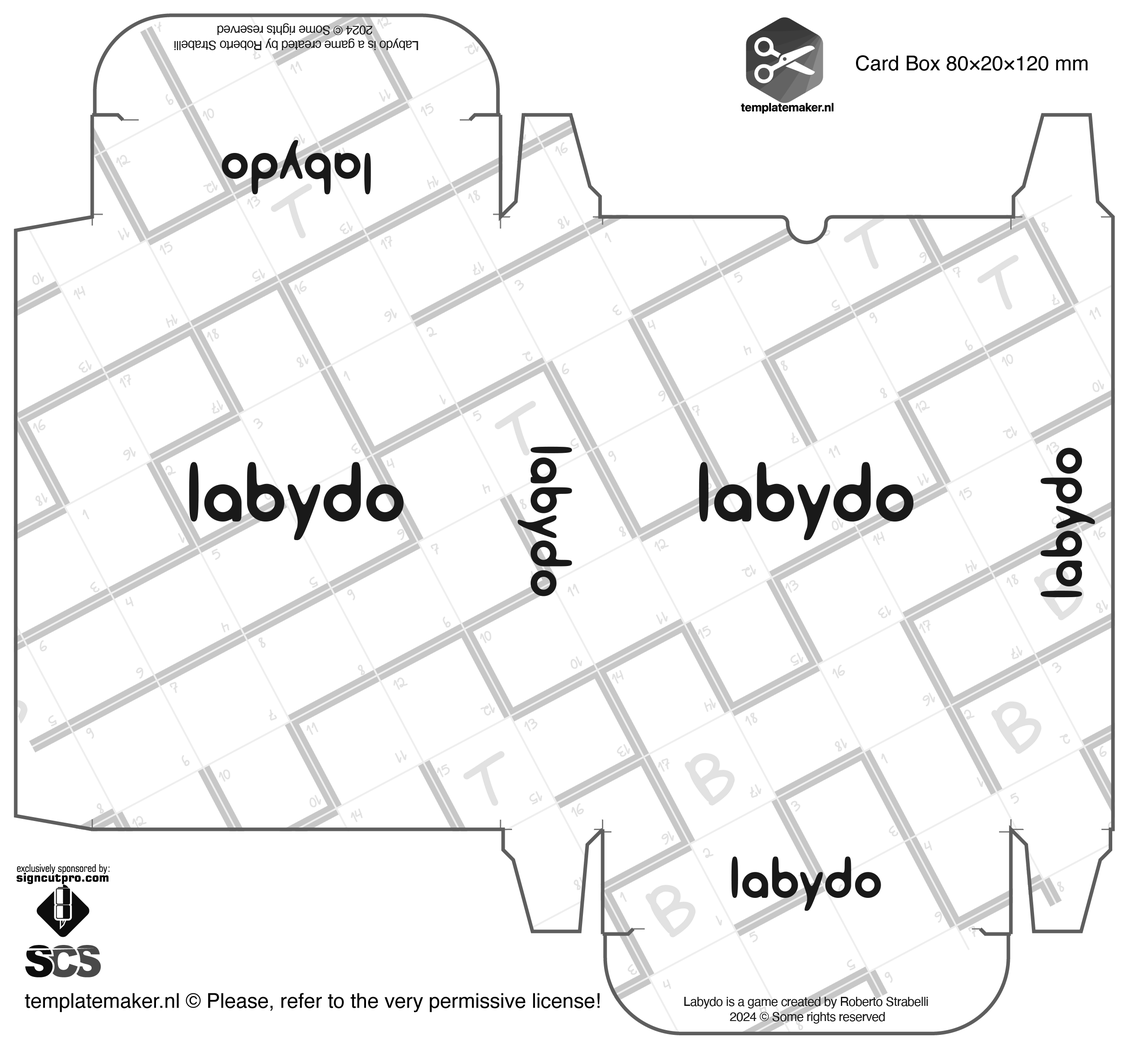
<style>
.page{position:relative;width:1133px;height:1053px;background:#ffffff}
.page>*{position:absolute;margin:0}
.t1{font:12.6px "Helvetica";letter-spacing:-0.025em;color:#191919}
.t2{font:73.8px "AngelikaPlayfull";letter-spacing:-0.025em;color:#191919}
.t3{font:106.2px "AngelikaPlayfull";letter-spacing:-0.025em;color:#191919}
</style>
<div class="page">
<p class="t1" style="left:174px;top:23px;width:244px;height:27px;text-align:center;rotate:180deg">Labydo is a game created by Roberto Strabelli <br>2024 © Some rights reserved</p>
<p class="t2" style="left:222px;top:140px;width:149px;height:54px;rotate:180deg">labydo</p>
<p class="t2" style="left:518px;top:446px;width:54px;height:150px;rotate:90deg">labydo</p>
<p class="t2" style="left:1040px;top:448px;width:55px;height:149px;rotate:-90deg">labydo</p>
<p class="t3" style="left:189px;top:462px;width:214px;height:78px">labydo</p>
<p class="t3" style="left:699px;top:462px;width:214px;height:78px">labydo</p>
<p class="t2" style="left:731px;top:856px;width:150px;height:55px">labydo</p>
<p class="t1" style="left:684px;top:997px;width:243px;height:26px;text-align:center">Labydo is a game created by Roberto Strabelli <br>2024 © Some rights reserved</p>
</div>
